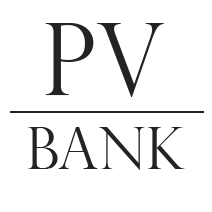
<style>
.page{position:relative;width:212px;height:212px;background:#ffffff}
.page>*{position:absolute;margin:0}
.t1{font:100px "PerpetuaTitlingMT-Light";color:#232323}
.t2{font:58.4px "PerpetuaTitlingMT-Light";color:#232323}
</style>
<div class="page">
<p class="t1" style="left:45px;top:23px;width:119px;height:74px">Pv</p>
<p class="t2" style="left:28px;top:127px;width:157px;height:43px">Bank</p>
</div>
